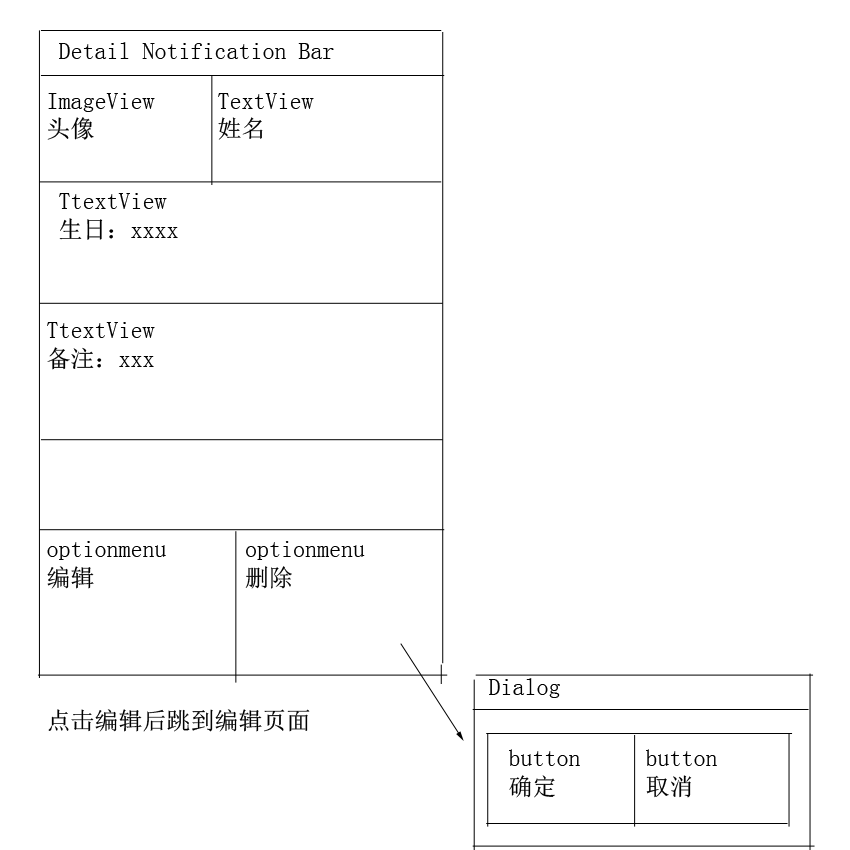
<style>
.page{position:relative;width:850px;height:850px;background:#ffffff}
.page>*{position:absolute;margin:0}
.t1{font:24px "SimSun";color:#000000}
</style>
<div class="page">
<p class="t1" style="left:59px;top:42px;width:275px;height:17px">Detail Notification Bar</p>
<p class="t1" style="left:47px;top:93px;width:108px;height:47px">ImageView<br>头像</p>
<p class="t1" style="left:218px;top:93px;width:96px;height:47px">TextView<br>姓名</p>
<p class="t1" style="left:59px;top:193px;width:119px;height:47px">TtextView<br>生日：xxxx</p>
<p class="t1" style="left:47px;top:322px;width:108px;height:48px">TtextView<br>备注：xxx</p>
<p class="t1" style="left:47px;top:541px;width:119px;height:48px">optionmenu<br>编辑</p>
<p class="t1" style="left:245px;top:541px;width:120px;height:48px">optionmenu<br>删除</p>
<p class="t1" style="left:489px;top:678px;width:71px;height:20px">Dialog</p>
<p class="t1" style="left:48px;top:709px;width:262px;height:23px">点击编辑后跳到编辑页面</p>
<p class="t1" style="left:509px;top:749px;width:71px;height:49px">button<br>确定</p>
<p class="t1" style="left:646px;top:749px;width:71px;height:49px">button<br>取消<br><br>取消<br>取消</p>
</div>
